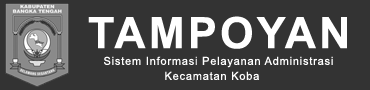
<style>
.page{position:relative;width:370px;height:90px;background:#333333}
.page>*{position:absolute;margin:0}
.t1{font:43.3px "Arial-BoldMT";letter-spacing:0.075em;color:#ffffff}
.t2{font:11px "ArialMT";letter-spacing:0.075em;color:#ffffff}
</style>
<div class="page">
<p class="t1" style="left:88px;top:16px;width:259px;height:33px">TAMPOYAN</p>
<p class="t2" style="left:104px;top:56px;width:229px;height:12px">Sistem Informasi Pelayanan Administrasi</p>
<p class="t2" style="left:165px;top:71px;width:94px;height:9px">Kecamatan Koba</p>
</div>
